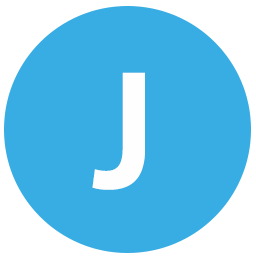
<style>
.page{position:relative;width:256px;height:256px;background:#38ade3}
.page>*{position:absolute;margin:0}
.t1{font:150px "AdobeGothicStd-Bold";letter-spacing:0.07em;color:#fefefe;text-transform:uppercase}
</style>
<div class="page">
<p class="t1" style="left:92px;top:72px;width:53px;height:118px">J</p>
</div>
